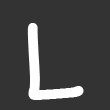
<style>
.page{position:relative;width:110px;height:110px;background:#333333}
.page>*{position:absolute;margin:0}
.t1{font:98px "Bromine";color:#ffffff}
</style>
<div class="page">
<p class="t1" style="left:27px;top:23px;width:57px;height:77px">L</p>
</div>
